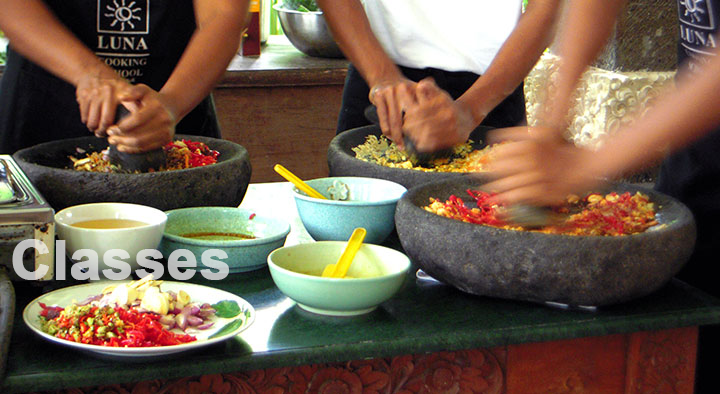
<style>
.page{position:relative;width:720px;height:394px}
.page>*{position:absolute;margin:0}
.t1{font:54px "Arial-BoldMT";color:#c0c3c0;font-weight:bold;scale:1.03 1}
</style>
<div class="page">
<p class="t1" style="left:12px;top:239px;width:217px;height:41px">Classes</p>
</div>
